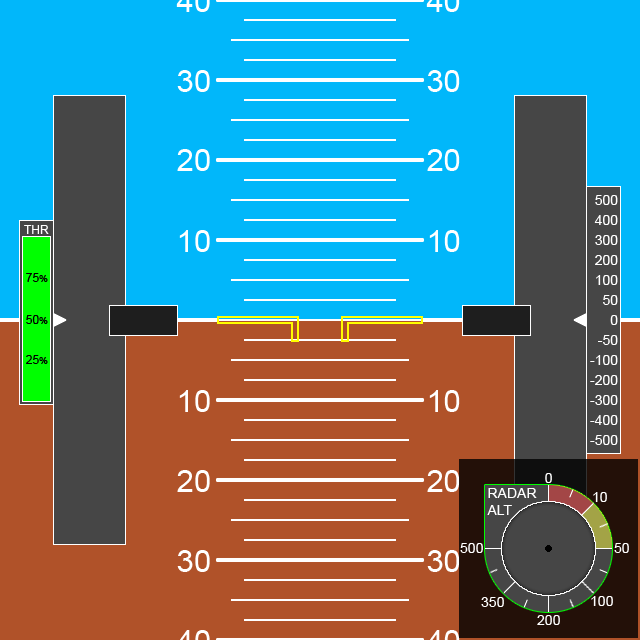
<style>
.page{position:relative;width:640px;height:640px;background:#01b7fa}
.page>*{position:absolute;margin:0}
.t1{font:14px "ArialMT";color:#ffffff}
.t2{font:12px "ArialMT";color:#ffffff}
.t3{font:12px "ArialMT";color:#000000}
.t4{font:10px "ArialMT";color:#000000}
</style>
<div class="page">
<p class="t1" style="left:595px;top:195px;width:23px;height:10px">500</p>
<p class="t1" style="left:594px;top:215px;width:24px;height:10px">400</p>
<p class="t2" style="left:24px;top:225px;width:25px;height:9px">THR</p>
<p class="t1" style="left:595px;top:235px;width:23px;height:10px">300</p>
<p class="t1" style="left:595px;top:255px;width:23px;height:10px">200</p>
<p class="t3" style="left:26px;top:273px;width:22px;height:9px">75<span class="t4">%</span></p>
<p class="t3" style="left:26px;top:273px;width:22px;height:9px">75<span class="t4">%</span></p>
<p class="t1" style="left:596px;top:275px;width:22px;height:10px">100</p>
<p class="t1" style="left:603px;top:295px;width:15px;height:10px">50</p>
<p class="t3" style="left:26px;top:315px;width:22px;height:9px">50<span class="t4">%</span></p>
<p class="t3" style="left:26px;top:315px;width:22px;height:9px">50<span class="t4">%</span></p>
<p class="t1" style="left:610px;top:315px;width:8px;height:10px">0</p>
<p class="t1" style="left:598px;top:335px;width:20px;height:10px">-50</p>
<p class="t3" style="left:26px;top:355px;width:22px;height:9px">25<span class="t4">%</span></p>
<p class="t3" style="left:26px;top:355px;width:22px;height:9px">25<span class="t4">%</span></p>
<p class="t1" style="left:590px;top:355px;width:28px;height:10px">-100</p>
<p class="t1" style="left:590px;top:375px;width:28px;height:10px">-200</p>
<p class="t1" style="left:590px;top:395px;width:28px;height:10px">-300</p>
<p class="t1" style="left:590px;top:415px;width:28px;height:10px">-400</p>
<p class="t1" style="left:590px;top:435px;width:28px;height:10px">-500</p>
<p class="t1" style="left:545px;top:473px;width:7px;height:10px">0</p>
<p class="t1" style="left:487px;top:488px;width:50px;height:27px">RADAR<br>ALT</p>
<p class="t1" style="left:593px;top:492px;width:14px;height:10px">10</p>
<p class="t1" style="left:460px;top:543px;width:23px;height:10px">500</p>
<p class="t1" style="left:614px;top:543px;width:15px;height:10px">50</p>
<p class="t1" style="left:481px;top:597px;width:23px;height:10px">350</p>
<p class="t1" style="left:591px;top:596px;width:22px;height:10px">100</p>
<p class="t1" style="left:537px;top:615px;width:23px;height:10px">200</p>
</div>
